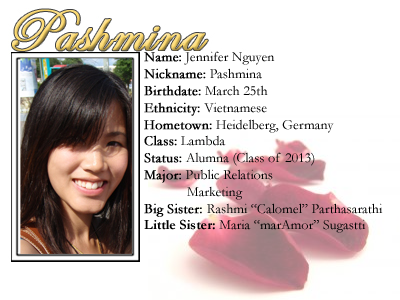
<style>
.page{position:relative;width:400px;height:300px;background:#ffffff}
.page>*{position:absolute;margin:0}
.t1{font:14px "Garamond";color:#000000}
.t2{font:14px "Garamond";color:#000000;font-weight:bold}
.t3{font:14px "Garamond-Bold";color:#000000}
</style>
<div class="page">
<p class="t1" style="left:144px;top:51px;width:239px;height:182px"><span class="t2">Name:</span> Jennifer Nguyen<br><span class="t2">Nickname:</span> Pashmina<br><span class="t2">Birthdate:</span> March 25th<br><span class="t2">Ethnicity:</span> Vietnamese<br><span class="t2">Hometown:</span> Heidelberg, Germany<br><span class="t2">Class:</span> Lambda<br><span class="t2">Status:</span> Alumna (Class of 2013) <br><span class="t2">Major:</span> Public Relations<br>   Marketing<br><span class="t2">Big Sister: </span>Rashmi “Calomel” Parthasarathi<br><span class="t3">Little Sister: </span>Maria “marAmor” Sugastti</p>
</div>
